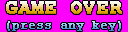
<style>
.page{position:relative;width:128px;height:32px;background:#ff00ff}
.page>*{position:absolute;margin:0}
.t1{font:12px/8px "CourierNewPSMT";font-weight:bold}
.t2{font:20px/8px "CourierNewPS-BoldMT";font-weight:bold}
</style>
<div class="page">
<p class="t1" style="left:6px;top:1px;width:116px;height:30px;text-align:center"><span class="t2">GAME OVER<br><br></span>(press any key)</p>
</div>
